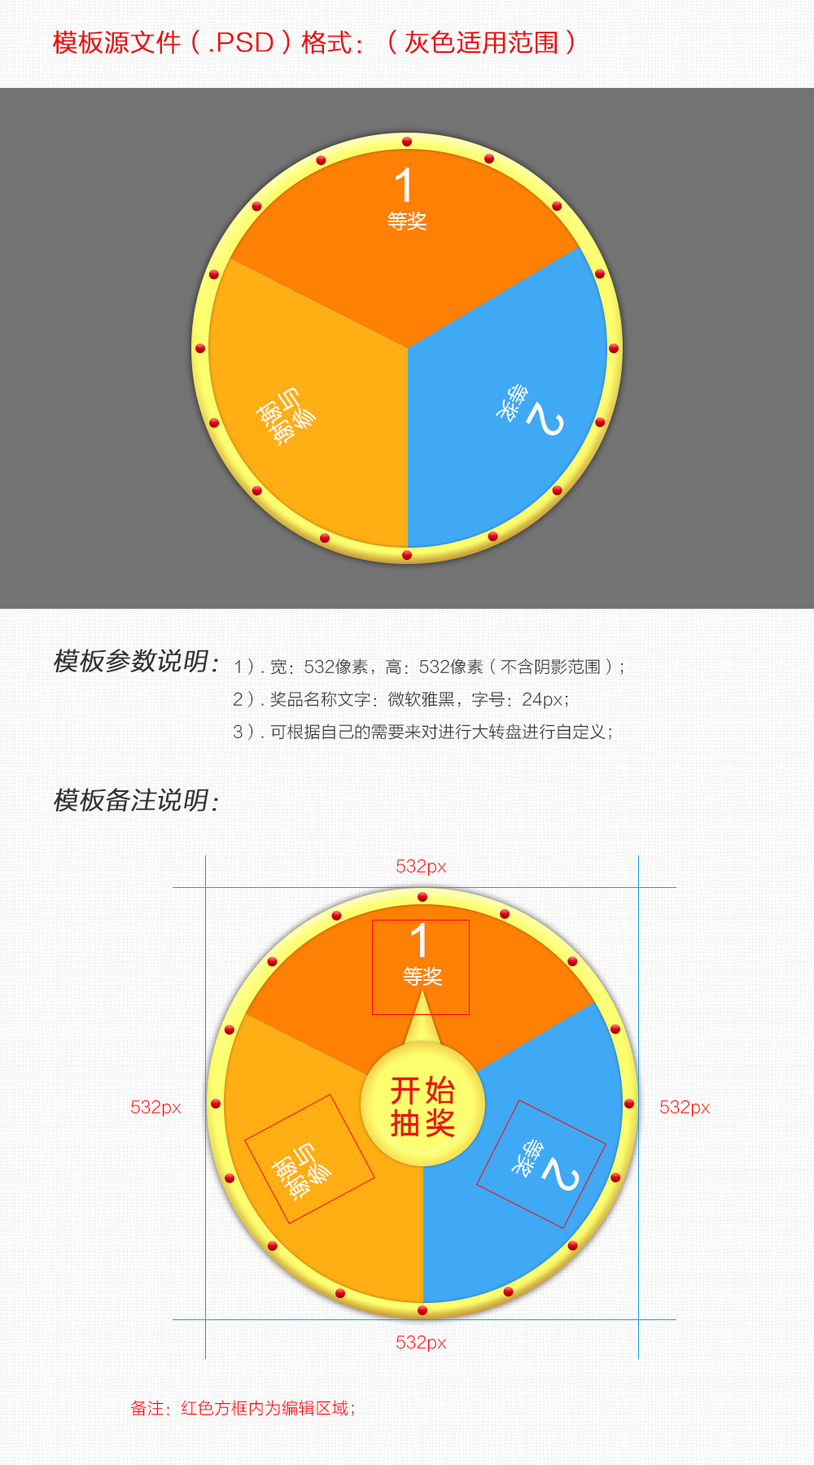
<style>
.page{position:relative;width:814px;height:1465px;background:#737373}
.page>*{position:absolute;margin:0}
.t1{font:24.4px "STHeitiSC-Light";color:#eb1111;font-weight:bold}
.t2{font:48.8px "ArialMT";color:#ffffff}
.t3{font:19.5px "MicrosoftYaHei";color:#ffffff}
.t4{font:22.8px/24.4px "MicrosoftYaHei";color:#ffffff}
.t5{font:24.4px "STHeitiSC-Light";color:#333333;font-weight:bold;font-style:italic}
.t6{font:16.3px/32.6px "STHeitiSC-Light";color:#333333}
.t7{font:16.3px "STHeitiSC-Light";color:#ff0000}
</style>
<div class="page">
<p class="t1" style="left:53px;top:29px;width:521px;height:26px">模板源文件（.PSD）格式：（灰色适用范围）</p>
<p class="t2" style="left:396px;top:168px;width:13px;height:34px">1</p>
<p class="t3" style="left:387px;top:212px;width:39px;height:18px">等奖</p>
<p class="t4" style="left:256px;top:387px;width:61px;height:59px;rotate:-124deg">谢谢<br>参与</p>
<p class="t3" style="left:496px;top:383px;width:32px;height:39px;rotate:118deg">等奖</p>
<p class="t2" style="left:525px;top:401px;width:39px;height:34px;rotate:119deg">2</p>
<p class="t5" style="left:54px;top:649px;width:164px;height:23px">模板参数说明：</p>
<p class="t6" style="left:233px;top:658px;width:390px;height:82px">1）. 宽：532像素，高：532像素（不含阴影范围）；<br>2）. 奖品名称文字：微软雅黑，字号：24px；<br>3）. 可根据自己的需要来对进行大转盘进行自定义；</p>
<p class="t5" style="left:54px;top:788px;width:164px;height:23px">模板备注说明：</p>
<p class="t7" style="left:396px;top:859px;width:50px;height:17px">532px</p>
<p class="t7" style="left:131px;top:1100px;width:50px;height:17px">532px</p>
<p class="t7" style="left:660px;top:1100px;width:50px;height:17px">532px</p>
<p class="t7" style="left:396px;top:1335px;width:50px;height:17px">532px</p>
<p class="t7" style="left:130px;top:1400px;width:224px;height:16px">备注：红色方框内为编辑区域；</p>
</div>
